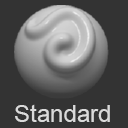
<style>
.page{position:relative;width:128px;height:128px;background:#333333}
.page>*{position:absolute;margin:0}
.t1{font:24px "ArialMT";color:#dadada}
</style>
<div class="page">
<p class="t1" style="left:15px;top:104px;width:95px;height:18px">Standard</p>
</div>
